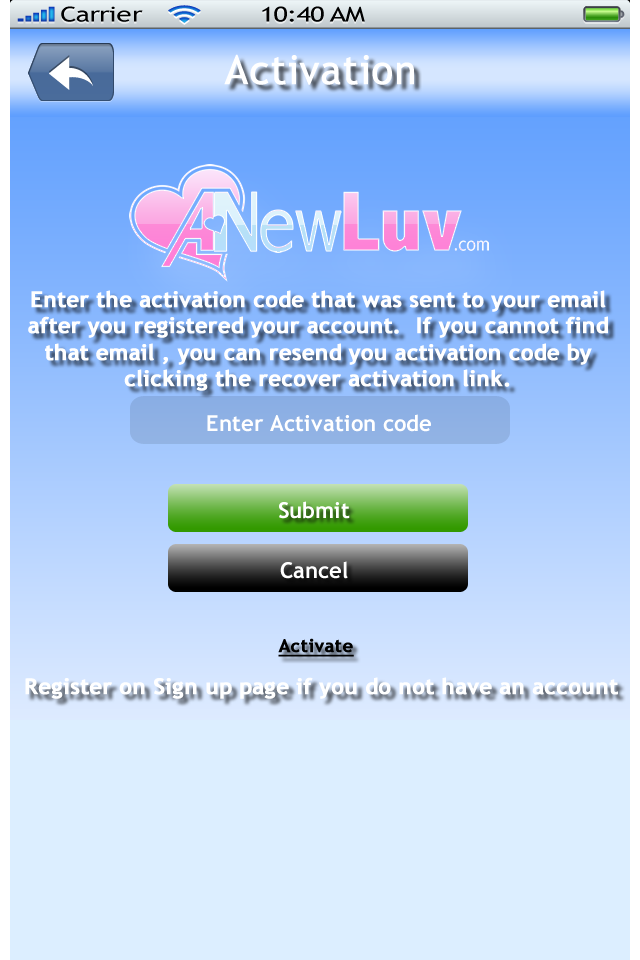
<style>
.page{position:relative;width:640px;height:960px;background:#dceeff}
.page>*{position:absolute;margin:0}
.t1{font:40px "TrebuchetMS";color:#ffffff;font-weight:bold}
.t2{font:22px/26.4px "TrebuchetMS-Bold";color:#ffffff;font-weight:bold}
.t3{font:22px "TrebuchetMS-Bold";color:#ffffff}
.t4{font:18px "TrebuchetMS-Bold";color:#000000;font-weight:bold;text-decoration:underline}
.t5{font:22px "TrebuchetMS-Bold";color:#ffffff;font-weight:bold}
</style>
<div class="page">
<p class="t1" style="left:224px;top:54px;width:190px;height:31px">Activation</p>
<p class="t2" style="left:28px;top:290px;width:580px;height:101px;text-align:center">Enter the activation code that was sent to your email after you registered your account.  If you cannot find that email , you can resend you activation code by clicking the recover activation link.</p>
<p class="t3" style="left:207px;top:414px;width:224px;height:18px">Enter Activation code</p>
<p class="t3" style="left:279px;top:501px;width:71px;height:18px">Submit</p>
<p class="t3" style="left:280px;top:561px;width:68px;height:18px">Cancel</p>
<p class="t4" style="left:278px;top:638px;width:76px;height:19px">Activate</p>
<p class="t5" style="left:25px;top:677px;width:593px;height:22px">Register on Sign up page if you do not have an account</p>
</div>
